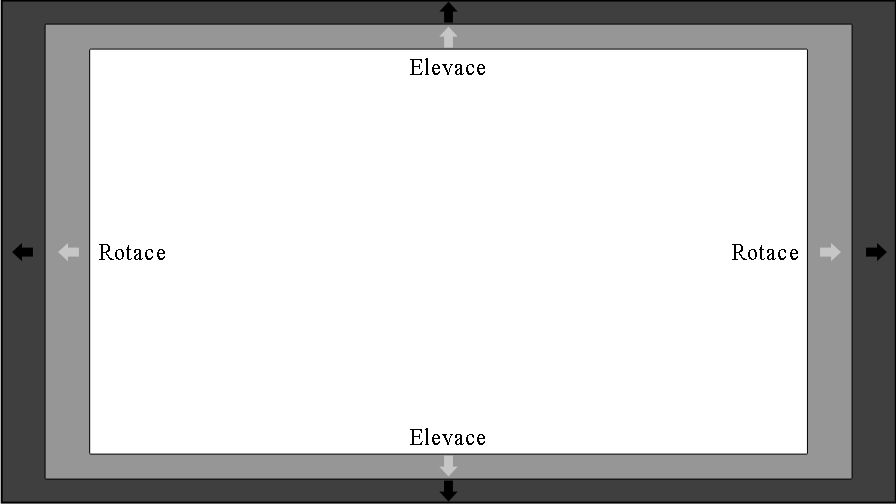
<style>
.page{position:relative;width:896px;height:504px;background:#ffffff}
.page>*{position:absolute;margin:0}
.t1{font:24px "TimesNewRomanPSMT";letter-spacing:0.05em;color:#000000;scale:0.9 1}
</style>
<div class="page">
<p class="t1" style="left:410px;top:58px;width:75px;height:17px">Elevace</p>
<p class="t1" style="left:99px;top:244px;width:66px;height:16px">Rotace</p>
<p class="t1" style="left:732px;top:244px;width:66px;height:16px">Rotace</p>
<p class="t1" style="left:410px;top:428px;width:75px;height:17px">Elevace</p>
</div>
